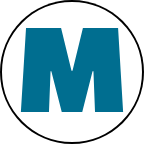
<style>
.page{position:relative;width:144px;height:144px;background:#ffffff}
.page>*{position:absolute;margin:0}
.t1{font:112px "BlackHanSans-Regular";color:#006e90}
</style>
<div class="page">
<p class="t1" style="left:20px;top:28px;width:104px;height:84px">M</p>
</div>
